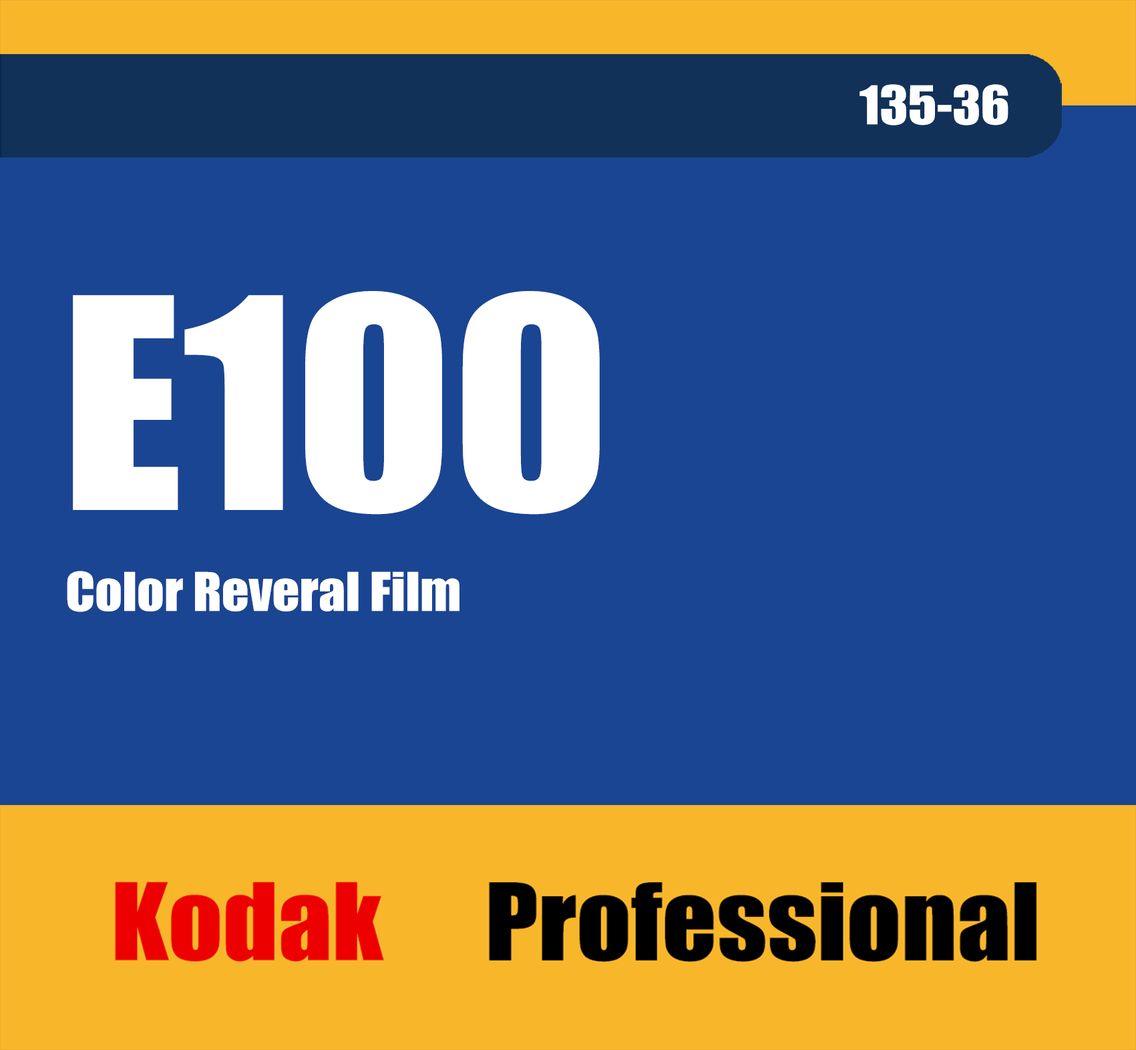
<style>
.page{position:relative;width:1136px;height:1050px;background:#1a4593}
.page>*{position:absolute;margin:0}
.t1{font:49.4px "Impact";color:#ffffff;scale:1.08 1}
.t2{font:271.6px "Impact";color:#ffffff;scale:1.08 1}
</style>
<div class="page">
<p class="t1" style="left:859px;top:84px;width:149px;height:42px">135-36</p>
<p class="t2" style="left:73px;top:291px;width:526px;height:224px">E100</p>
<p class="t1" style="left:67px;top:571px;width:392px;height:41px">Color Reveral Film</p>
</div>
